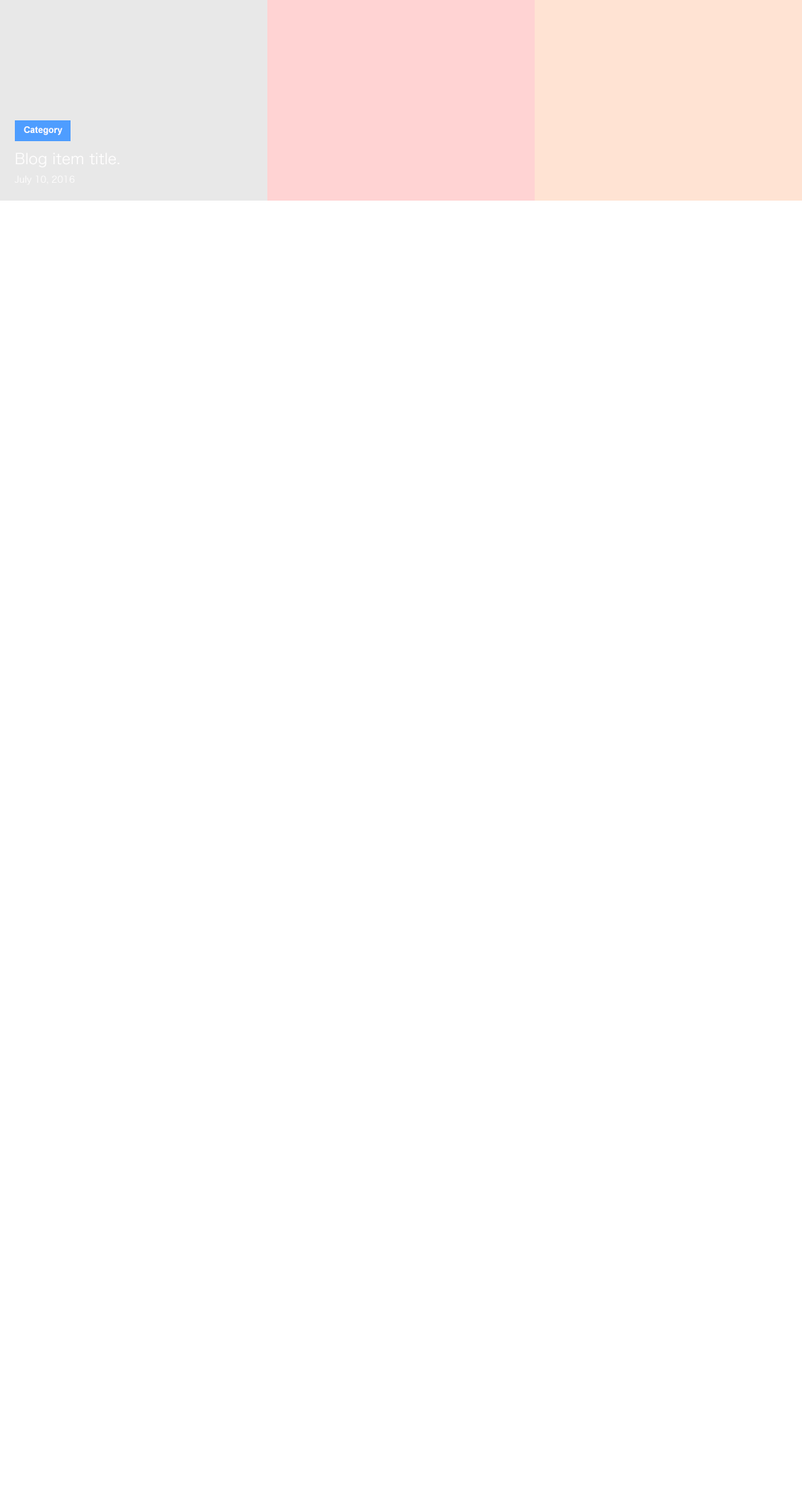
<style>
.page{position:relative;width:802px;height:1486px;background:#ffffff}
.page>*{position:absolute;margin:0}
.t1{font:8.9px "Arial-BoldMT";color:#fffefe}
.t2{font:14.9px/18.6px "HiraKakuPro-W3";color:#fffefe}
.t3{font:8.9px/18.6px "HiraKakuPro-W3";color:#fffefe}
</style>
<div class="page">
<p class="t1" style="left:24px;top:126px;width:38px;height:9px">Category</p>
<p class="t2" style="left:14px;top:152px;width:106px;height:33px">Blog item title.<br><span class="t3">July 10, 2016</span></p>
</div>
